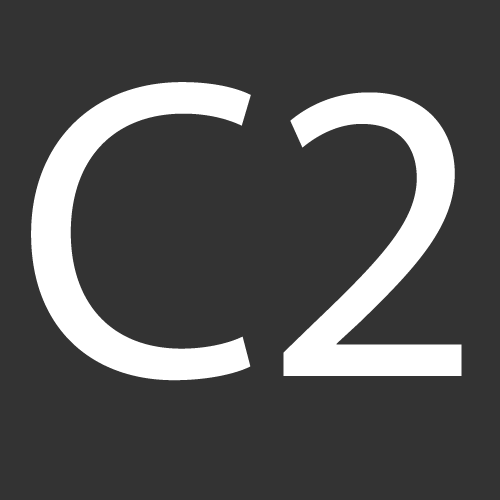
<style>
.page{position:relative;width:500px;height:500px;background:#333333}
.page>*{position:absolute;margin:0}
.t1{font:428.6px "MyriadPro-Regular";color:#ffffff}
</style>
<div class="page">
<p class="t1" style="left:31px;top:82px;width:431px;height:299px">C2</p>
</div>
